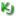
<style>
.page{position:relative;width:16px;height:16px;background:#ffffff}
.page>*{position:absolute;margin:0}
.t1{font:12px "SegoeScript-Bold"}
</style>
<div class="page">
<p class="t1" style="left:1px;top:2px;width:9px;height:9px">K</p>
<p class="t1" style="left:6px;top:5px;width:7px;height:9px">J</p>
</div>
